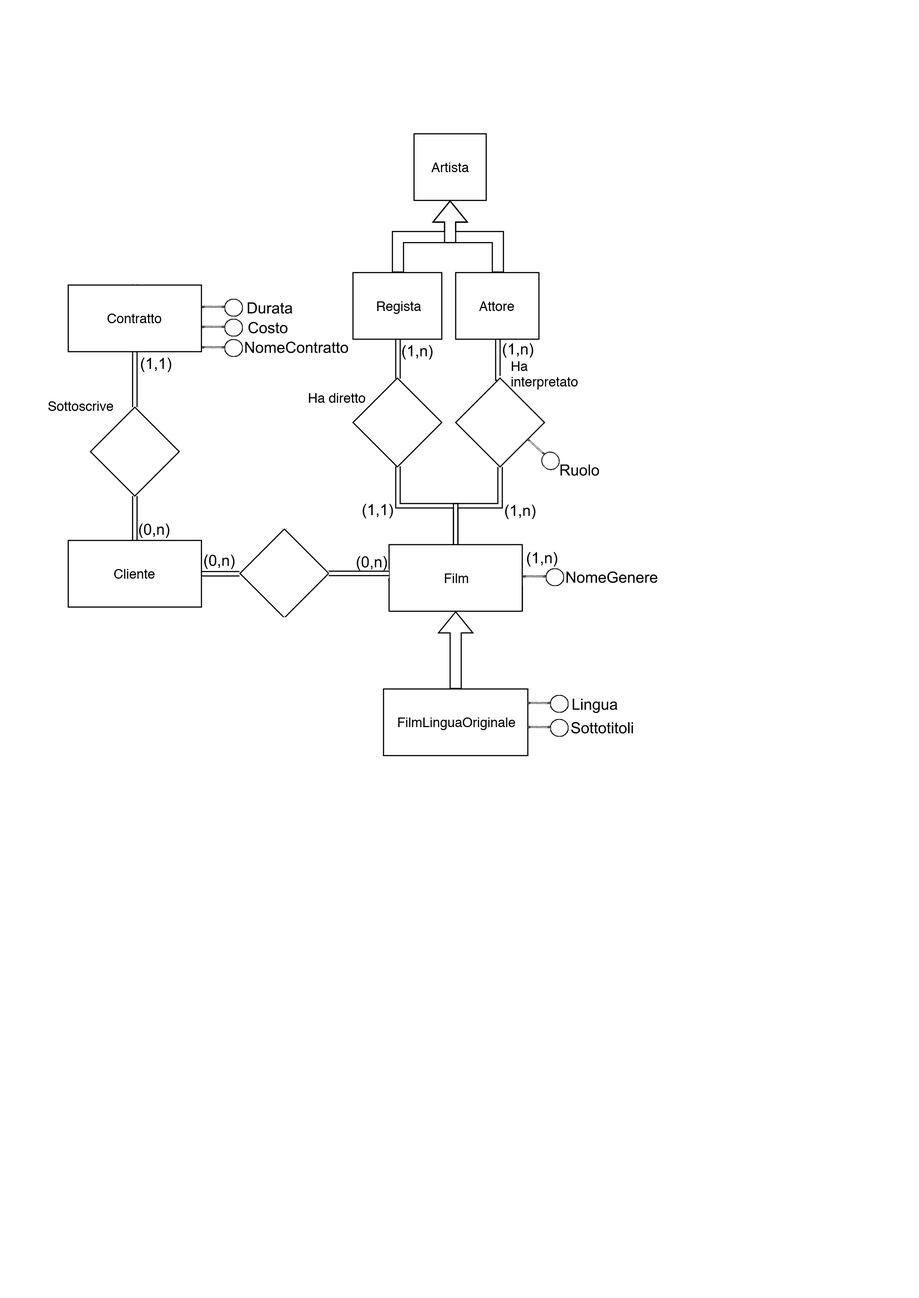
<style>
.page{position:relative;width:919px;height:1298px;background:#ffffff}
.page>*{position:absolute;margin:0}
.t1{font:15.4px "ArialMT";color:#050505}
</style>
<div class="page">
<p class="t1" style="left:248px;top:302px;width:44px;height:12px">Durata</p>
<p class="t1" style="left:248px;top:322px;width:40px;height:11px">Costo</p>
<p class="t1" style="left:245px;top:341px;width:103px;height:12px">NomeContratto</p>
<p class="t1" style="left:402px;top:345px;width:31px;height:15px">(1,n)</p>
<p class="t1" style="left:503px;top:343px;width:30px;height:15px">(1,n)</p>
<p class="t1" style="left:141px;top:358px;width:30px;height:14px">(1,1)</p>
<p class="t1" style="left:560px;top:464px;width:39px;height:12px">Ruolo</p>
<p class="t1" style="left:362px;top:504px;width:31px;height:15px">(1,1)</p>
<p class="t1" style="left:505px;top:504px;width:31px;height:15px">(1,n)</p>
<p class="t1" style="left:139px;top:523px;width:31px;height:15px">(0,n)</p>
<p class="t1" style="left:204px;top:554px;width:31px;height:15px">(0,n)</p>
<p class="t1" style="left:356px;top:556px;width:31px;height:15px">(0,n)</p>
<p class="t1" style="left:527px;top:552px;width:30px;height:15px">(1,n)</p>
<p class="t1" style="left:566px;top:571px;width:91px;height:12px">NomeGenere</p>
<p class="t1" style="left:573px;top:698px;width:44px;height:15px">Lingua</p>
<p class="t1" style="left:571px;top:722px;width:62px;height:12px">Sottotitoli</p>
</div>
